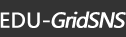
<style>
.page{position:relative;width:126px;height:37px;background:#333333}
.page>*{position:absolute;margin:0}
.t1{font:20px "MicrosoftYaHei";letter-spacing:-0.075em;color:#ffffff;font-weight:bold;font-style:italic}
.t2{font:20px "MicrosoftYaHei";color:#ffffff;font-weight:bold}
.t3{font:21px "MicrosoftYaHei";letter-spacing:-0.075em;color:#ffffff;font-weight:bold}
</style>
<div class="page">
<p class="t1" style="left:0px;top:11px;width:126px;height:17px"><span class="t2">EDU</span><span class="t3">-</span>GridSNS</p>
</div>
